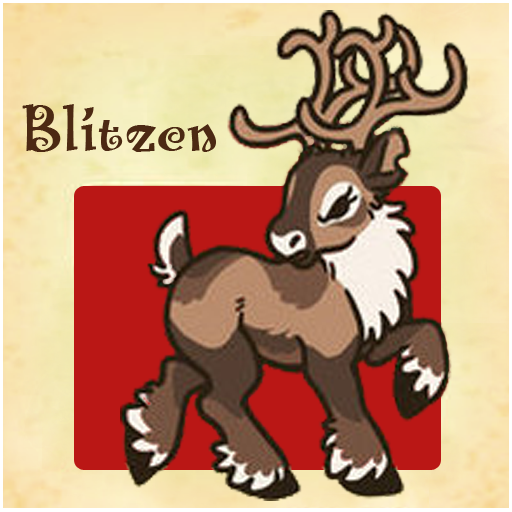
<style>
.page{position:relative;width:512px;height:512px}
.page>*{position:absolute;margin:0}
.t1{font:66.7px "SantasBigSecretBB";color:#4c2913}
</style>
<div class="page">
<p class="t1" style="left:22px;top:104px;width:194px;height:48px">Blitzen</p>
</div>
